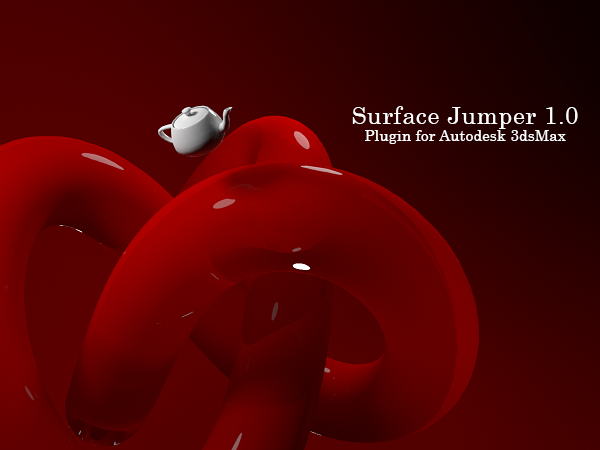
<style>
.page{position:relative;width:600px;height:450px}
.page>*{position:absolute;margin:0}
.t1{font:14.7px "Century";letter-spacing:0.025em;color:#ffffff}
.t2{font:24px "Century";letter-spacing:0.025em;color:#ffffff}
</style>
<div class="page">
<p class="t1" style="left:352px;top:106px;width:226px;height:38px;text-align:center"><span class="t2">Surface Jumper 1.0<br></span>Plugin for Autodesk 3dsMax</p>
</div>
